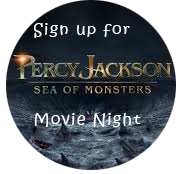
<style>
.page{position:relative;width:184px;height:174px;background:#ffffff}
.page>*{position:absolute;margin:0}
.t1{font:15px/90px "KristenITC-Regular";letter-spacing:0.1em;color:#ffffff}
</style>
<div class="page">
<p class="t1" style="left:34px;top:23px;width:107px;height:104px">Sign up for<br>Movie Night</p>
</div>
